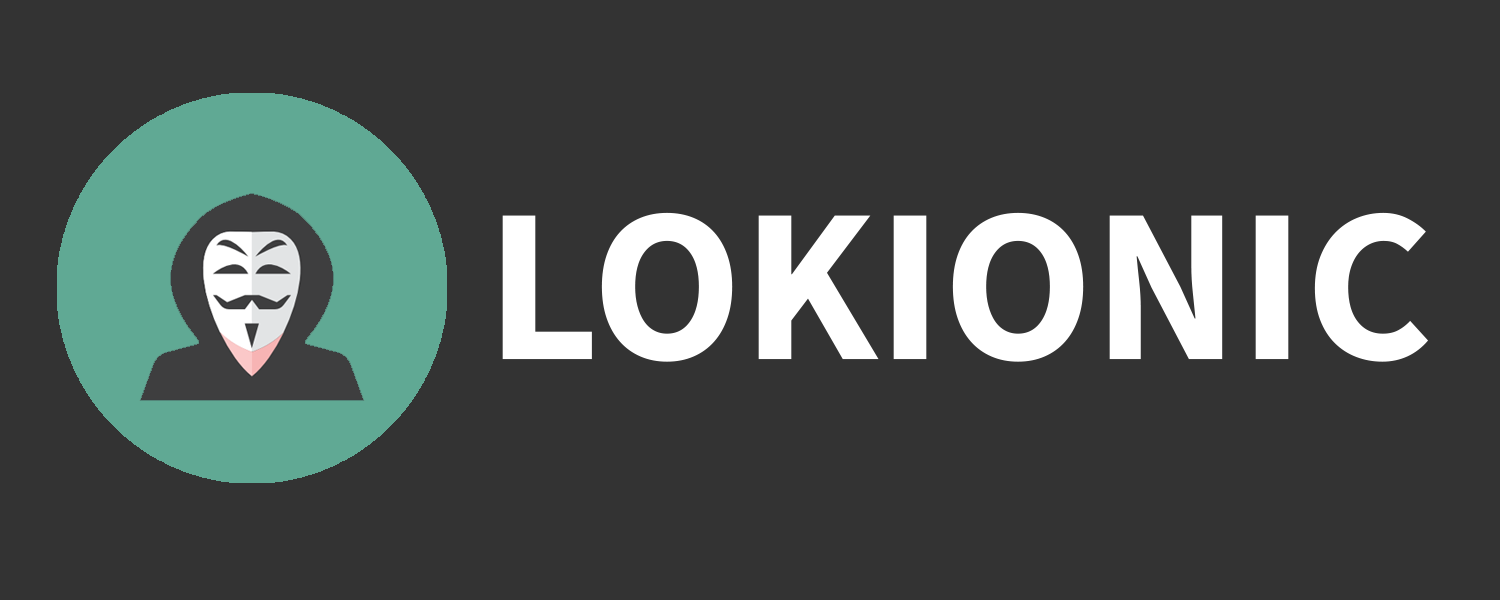
<style>
.page{position:relative;width:1500px;height:600px;background:#333333}
.page>*{position:absolute;margin:0}
.t1{font:220px "SourceSansPro-Bold";color:#ffffff}
</style>
<div class="page">
<p class="t1" style="left:502px;top:212px;width:926px;height:150px">LOKIONIC</p>
</div>
